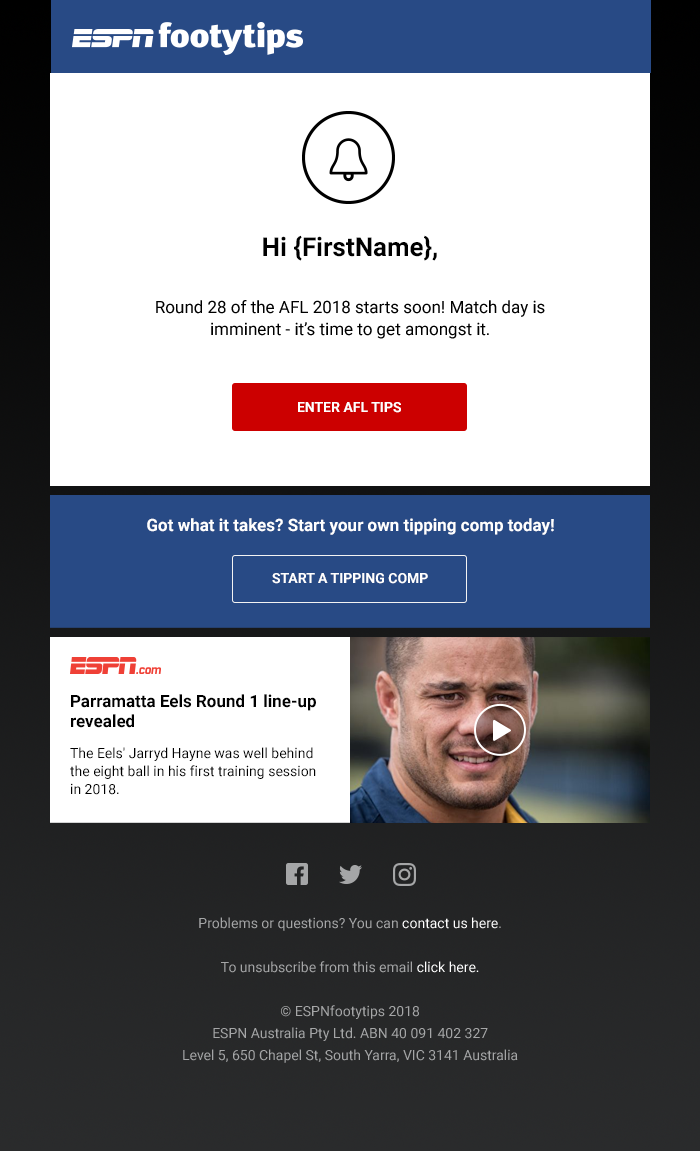
<style>
.page{position:relative;width:700px;height:1151px;background:#ffffff}
.page>*{position:absolute;margin:0}
.t1{font:26px "Roboto-Bold";color:#000000}
.t2{font:17px/22px "Roboto-Regular";color:#000000}
.t3{font:14px "Roboto-Bold";color:#ffffff;text-transform:uppercase}
.t4{font:17px "Roboto-Bold";color:#ffffff}
.t5{font:17px/20px "Roboto-Bold";color:#000000}
.t6{font:14px/18px "Roboto-Regular";color:#000000}
</style>
<div class="page">
<p class="t1" style="left:263px;top:235px;width:174px;height:26px">Hi {FirstName},</p>
<p class="t2" style="left:156px;top:300px;width:389px;height:39px;text-align:center">Round 28 of the AFL 2018 starts soon! Match day is imminent - it’s time to get amongst it.</p>
<p class="t3" style="left:298px;top:402px;width:103px;height:11px">Enter AFL tips</p>
<p class="t4" style="left:147px;top:518px;width:407px;height:17px">Got what it takes? Start your own tipping comp today!</p>
<p class="t3" style="left:272px;top:573px;width:156px;height:11px">START A TIPPING COMP</p>
<p class="t5" style="left:71px;top:694px;width:245px;height:34px">Parramatta Eels Round 1 line-up revealed</p>
<p class="t6" style="left:70px;top:747px;width:246px;height:48px">The Eels' Jarryd Hayne was well behind the eight ball in his first training session in 2018.</p>
</div>
